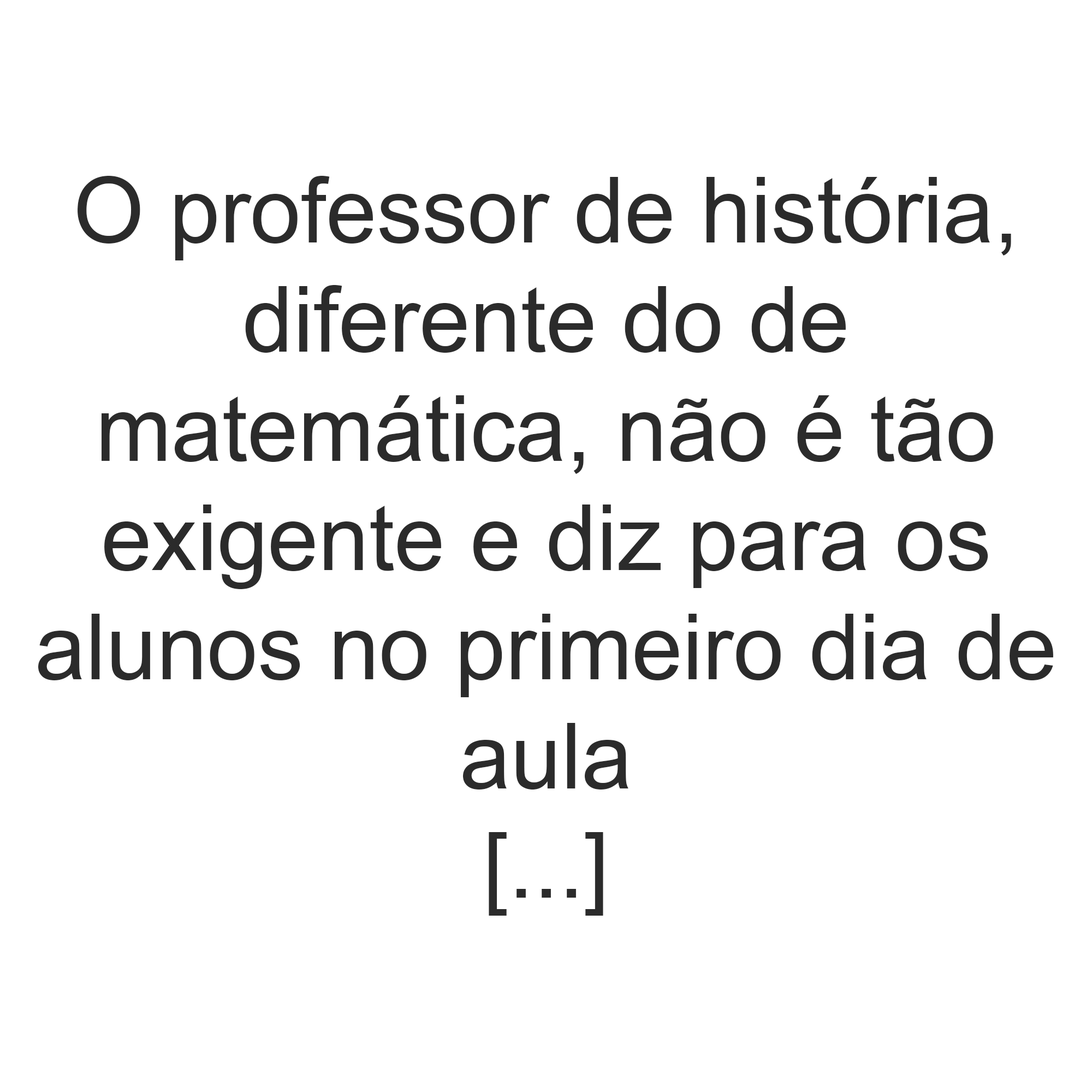
<style>
.page{position:relative;width:1092px;height:1092px;background:#ffffff}
.page>*{position:absolute;margin:0}
.t1{font:91px "ArialMT";color:#2b2b2b}
</style>
<div class="page">
<p class="t1" style="left:38px;top:176px;width:1015px;height:740px;text-align:center">O professor de história,<br>diferente do de<br>matemática, não é tão<br>exigente e diz para os<br>alunos no primeiro dia de<br>aula<br>[...]</p>
</div>
